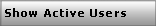
<style>
.page{position:relative;width:156px;height:26px}
.page>*{position:absolute;margin:0}
.t1{font:11px "Tahoma-Bold";letter-spacing:0.1em;color:#000000}
</style>
<div class="page">
<p class="t1" style="left:5px;top:8px;width:121px;height:9px">Show Active Users</p>
</div>
